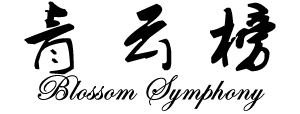
<style>
.page{position:relative;width:300px;height:114px;background:#ffffff}
.page>*{position:absolute;margin:0}
.t1{font:72px "2.0-";letter-spacing:0.3em;color:#000000}
.t2{font:36px "EdwardianScriptITC";color:#000000;font-weight:bold}
</style>
<div class="page">
<p class="t1" style="left:24px;top:1px;width:252px;height:74px">青云榜</p>
<p class="t2" style="left:37px;top:75px;width:228px;height:36px">Blossom Symphony</p>
</div>
